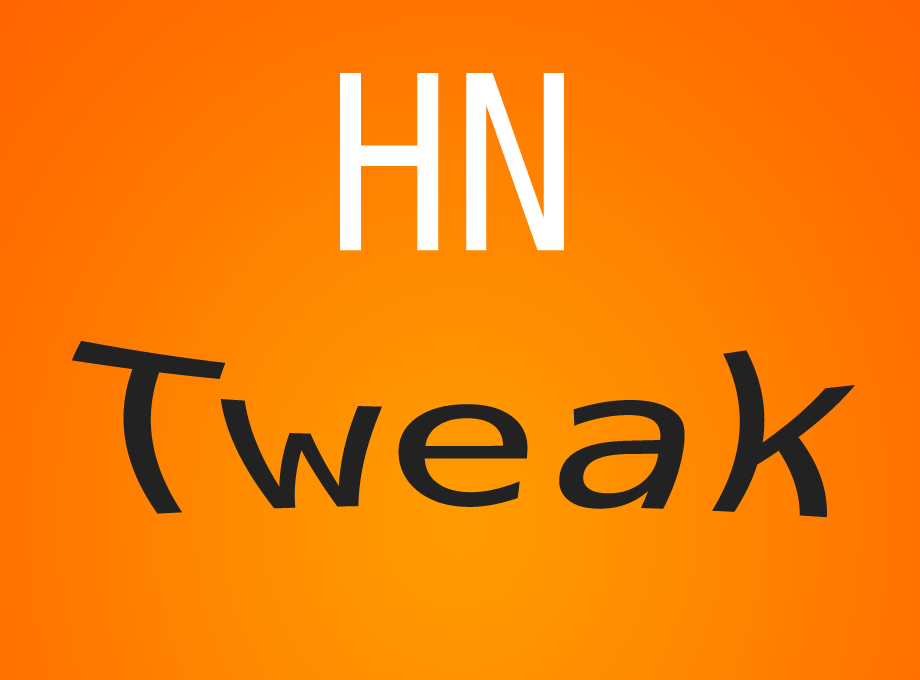
<style>
.page{position:relative;width:920px;height:680px}
.page>*{position:absolute;margin:0}
.t1{font:242.9px "DejaVuSansMono";color:#ffffff;scale:0.86 1}
.t2{font:242.9px "DejaVuSansMono";color:#222222;scale:0.86 1}
</style>
<div class="page">
<p class="t1" style="left:340px;top:73px;width:224px;height:178px">HN</p>
<p class="t2" style="left:72px;top:340px;width:783px;height:178px">Tweak</p>
</div>
